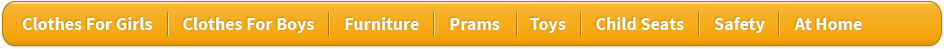
<style>
.page{position:relative;width:944px;height:49px}
.page>*{position:absolute;margin:0}
.t1{font:18px "SourceSansPro-Bold";color:#ffffff}
</style>
<div class="page">
<p class="t1" style="left:22px;top:17px;width:840px;height:16px">Clothes For Girls        Clothes For Boys        Furniture        Prams        Toys        Child Seats        Safety        At Home</p>
</div>
